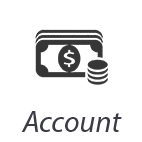
<style>
.page{position:relative;width:142px;height:142px;background:#ffffff}
.page>*{position:absolute;margin:0}
.t1{font:30px "MyriadPro-It";color:#3b3b44}
</style>
<div class="page">
<p class="t1" style="left:21px;top:111px;width:101px;height:21px">Account</p>
</div>
